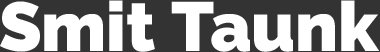
<style>
.page{position:relative;width:380px;height:52px;background:#ffffff}
.page>*{position:absolute;margin:0}
.t1{font:69.3px "Raleway-Black";color:#ffffff}
</style>
<div class="page">
<p class="t1" style="left:0px;top:0px;width:380px;height:52px">Smit Taunk</p>
</div>
